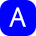
<style>
.page{position:relative;width:36px;height:36px;background:#0000ff}
.page>*{position:absolute;margin:0}
.t1{font:24px "AppleGothic";color:#ffffff}
</style>
<div class="page">
<p class="t1" style="left:9px;top:7px;width:17px;height:20px">A</p>
</div>
